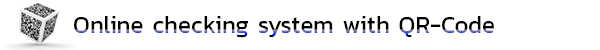
<style>
.page{position:relative;width:600px;height:50px;background:#ffffff}
.page>*{position:absolute;margin:0}
.t1{font:24px "Kanit-Regular";color:#000000}
</style>
<div class="page">
<p class="t1" style="left:74px;top:16px;width:420px;height:22px">Online checking system with QR-Code</p>
</div>
